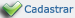
<style>
.page{position:relative;width:75px;height:18px;background:#eff0f1}
.page>*{position:absolute;margin:0}
.t1{font:10px "Verdana";color:#336ca1}
</style>
<div class="page">
<p class="t1" style="left:24px;top:5px;width:50px;height:8px">Cadastrar</p>
</div>
